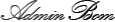
<style>
.page{position:relative;width:115px;height:22px;background:#ffffff}
.page>*{position:absolute;margin:0}
.t1{font:29.2px "KunstlerScript"}
.t2{font:29.2px "KunstlerScript";color:#303030}
.t3{font:29.2px "KunstlerScript";color:#000000}
</style>
<div class="page">
<p class="t1" style="left:0px;top:0px;width:114px;height:20px">AdminBom</p>
<p class="t2" style="left:1px;top:0px;width:114px;height:20px">Admin<span class="t3">Bom</span></p>
</div>
